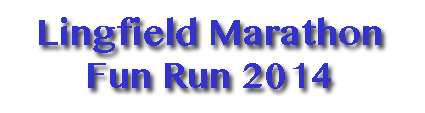
<style>
.page{position:relative;width:425px;height:113px;background:#ffffff}
.page>*{position:absolute;margin:0}
.t1{font:36px "MyanmarMN-Bold";color:#3333cc}
</style>
<div class="page">
<p class="t1" style="left:39px;top:17px;width:342px;height:72px;text-align:center">Lingfield Marathon<br>Fun Run 2014</p>
</div>
